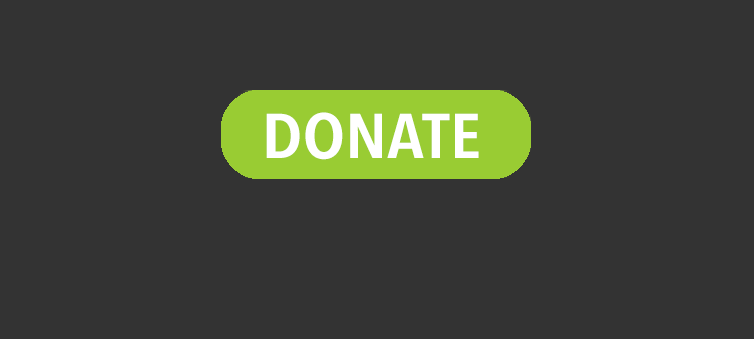
<style>
.page{position:relative;width:754px;height:339px;background:#333333}
.page>*{position:absolute;margin:0}
.t1{font:62.5px "AvenirNextCondensed-DemiBold";color:#ffffff;scale:1.15 1}
</style>
<div class="page">
<p class="t1" style="left:266px;top:112px;width:213px;height:48px">DONATE</p>
</div>
